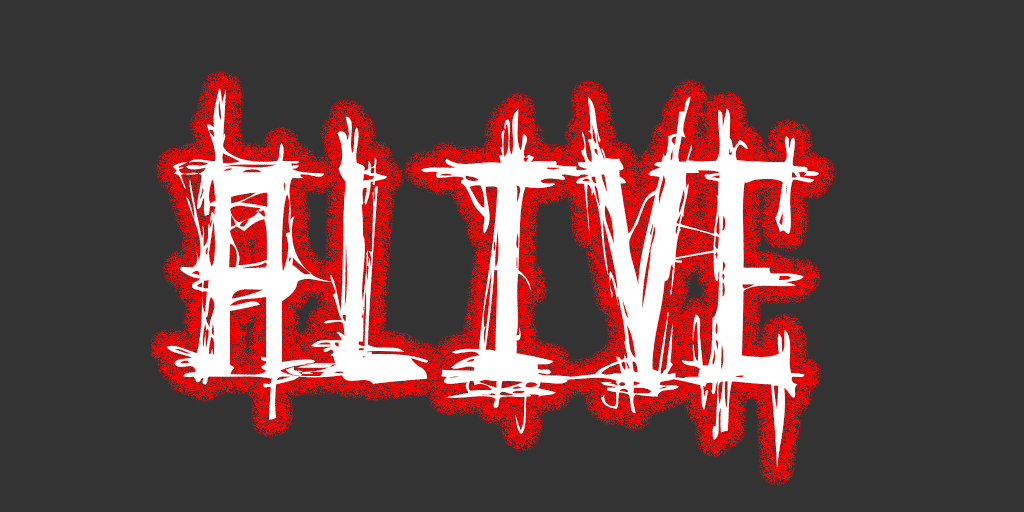
<style>
.page{position:relative;width:1024px;height:512px;background:#333333}
.page>*{position:absolute;margin:0}
.t1{font:436.1px "Psychotic";color:#ffffff;scale:0.9 1}
</style>
<div class="page">
<p class="t1" style="left:166px;top:88px;width:653px;height:381px">ALIVE</p>
</div>
